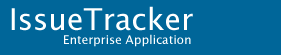
<style>
.page{position:relative;width:281px;height:55px;background:#006699}
.page>*{position:absolute;margin:0}
.t1{font:30px "LucidaSansUnicode";color:#ffffff}
.t2{font:12px "LucidaSansUnicode";color:#ffffff}
</style>
<div class="page">
<p class="t1" style="left:11px;top:6px;width:182px;height:25px">IssueTracker</p>
<p class="t2" style="left:64px;top:34px;width:127px;height:13px">Enterprise Application</p>
</div>
